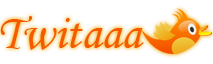
<style>
.page{position:relative;width:213px;height:64px;background:#ffffff}
.page>*{position:absolute;margin:0}
.t1{font:48px "MonotypeCorsiva";color:#f65a00}
</style>
<div class="page">
<p class="t1" style="left:0px;top:16px;width:144px;height:34px">Twitaaa</p>
</div>
